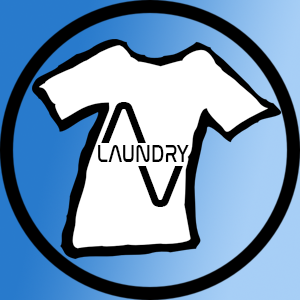
<style>
.page{position:relative;width:300px;height:300px;background:#ffffff}
.page>*{position:absolute;margin:0}
.t1{font:60px "NasalizationRg-Regular";color:#000000}
.t2{font:24px "NasalizationRg-Regular";color:#000000;scale:0.76 1}
</style>
<div class="page">
<p class="t1" style="left:101px;top:102px;width:45px;height:41px">A</p>
<p class="t2" style="left:98px;top:145px;width:91px;height:17px">LAUNDRY</p>
<p class="t1" style="left:138px;top:166px;width:45px;height:41px">V</p>
</div>
